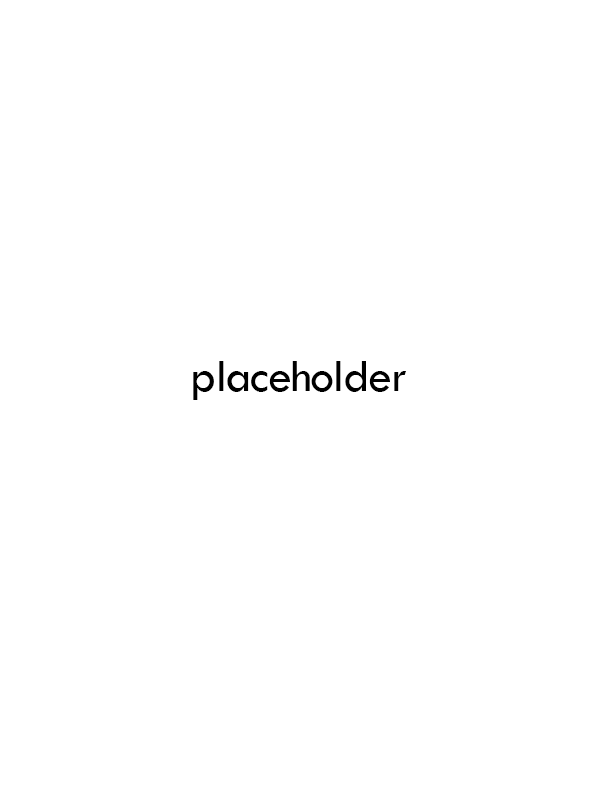
<style>
.page{position:relative;width:600px;height:800px;background:#ffffff}
.page>*{position:absolute;margin:0}
.t1{font:48.1px "TwCenMT-Regular";letter-spacing:-0.025em;color:#000000}
</style>
<div class="page">
<p class="t1" style="left:193px;top:361px;width:213px;height:39px">placeholder</p>
</div>
